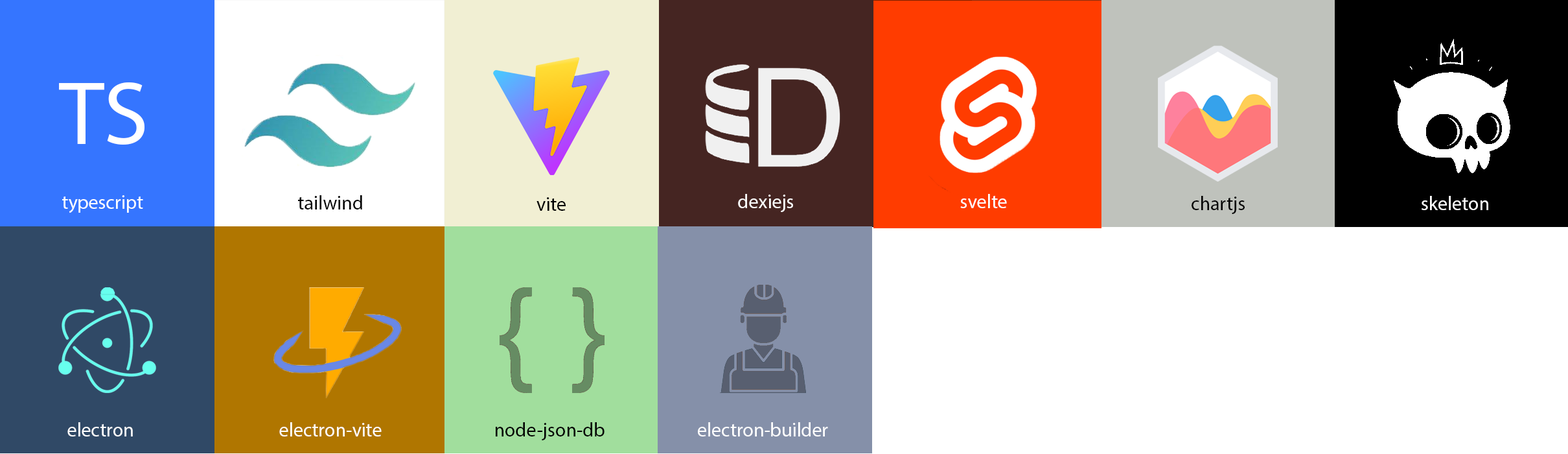
<style>
.page{position:relative;width:1568px;height:454px;background:#ffffff}
.page>*{position:absolute;margin:0}
.t1{font:90.7px "MyriadPro-Regular";color:#ffffff}
.t2{font:19.4px "MyriadPro-Regular";color:#ffffff}
.t3{font:19.4px "MyriadPro-Regular";color:#000000}
.t4{font:19.5px "MyriadPro-Regular";color:#000000}
</style>
<div class="page">
<p class="t1" style="left:59px;top:82px;width:85px;height:62px">TS</p>
<p class="t2" style="left:62px;top:195px;width:81px;height:18px">typescript</p>
<p class="t3" style="left:298px;top:195px;width:64px;height:14px">tailwind</p>
<p class="t4" style="left:536px;top:197px;width:30px;height:14px">vite</p>
<p class="t2" style="left:738px;top:194px;width:55px;height:18px">dexiejs</p>
<p class="t2" style="left:960px;top:194px;width:47px;height:14px">svelte</p>
<p class="t3" style="left:1192px;top:196px;width:53px;height:18px">chartjs</p>
<p class="t2" style="left:1422px;top:196px;width:66px;height:14px">skeleton</p>
<p class="t2" style="left:67px;top:422px;width:66px;height:14px">electron</p>
<p class="t2" style="left:279px;top:422px;width:103px;height:14px">electron-vite</p>
<p class="t3" style="left:496px;top:422px;width:109px;height:18px">node-json-db</p>
<p class="t2" style="left:698px;top:422px;width:130px;height:14px">electron-builder</p>
</div>
